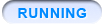
<style>
.page{position:relative;width:104px;height:26px}
.page>*{position:absolute;margin:0}
.t1{font:14px "Arial-BoldMT";letter-spacing:0.05em;color:#008aff}
</style>
<div class="page">
<p class="t1" style="left:18px;top:8px;width:69px;height:10px">RUNNING</p>
</div>
